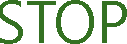
<style>
.page{position:relative;width:127px;height:44px;background:#ffffff}
.page>*{position:absolute;margin:0}
.t1{font:60px "Leelawadee";color:#347122;scale:0.96 1}
</style>
<div class="page">
<p class="t1" style="left:0px;top:0px;width:127px;height:44px">STOP</p>
</div>
